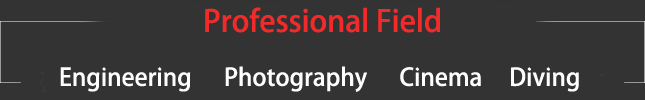
<style>
.page{position:relative;width:645px;height:100px;background:#333333}
.page>*{position:absolute;margin:0}
.t1{font:30px "AdobeHeitiStd-Regular";color:#f32a2a}
.t2{font:24px "AdobeHeitiStd-Regular";color:#fefefe}
</style>
<div class="page">
<p class="t1" style="left:205px;top:7px;width:235px;height:26px">Professional Field</p>
<p class="t2" style="left:60px;top:66px;width:519px;height:26px">Engineering      Photography      Cinema     Diving</p>
</div>
